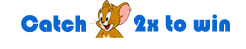
<style>
.page{position:relative;width:246px;height:49px;background:#ffffff}
.page>*{position:absolute;margin:0}
.t1{font:24px "Bauhaus93";color:#0867d2}
</style>
<div class="page">
<p class="t1" style="left:21px;top:15px;width:65px;height:18px">Catch</p>
<p class="t1" style="left:134px;top:14px;width:96px;height:18px">2x to win</p>
</div>
